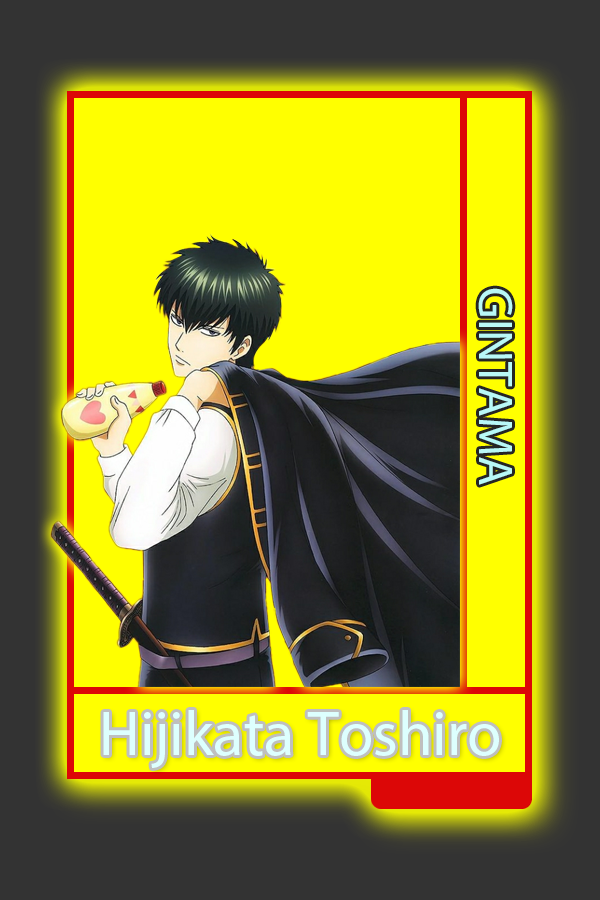
<style>
.page{position:relative;width:600px;height:900px;background:#ffff00}
.page>*{position:absolute;margin:0}
.t1{font:48.8px "MyriadPro-Regular";color:#b8f8f7}
.t2{font:62.5px "MyriadPro-Regular";color:#ddfffe}
</style>
<div class="page">
<p class="t1" style="left:478px;top:288px;width:35px;height:197px;rotate:90deg">GINTAMA</p>
<p class="t2" style="left:103px;top:710px;width:396px;height:58px">Hijikata Toshiro</p>
</div>
